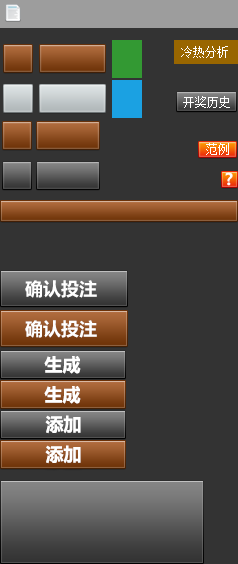
<style>
.page{position:relative;width:238px;height:564px;background:#333333}
.page>*{position:absolute;margin:0}
.t1{font:12px "NSimSun";color:#ffffff}
.t2{font:16px "MicrosoftYaHei-Bold";color:#ffffff}
.t3{font:18px "MicrosoftYaHei-Bold";color:#ffffff}
.t4{font:18px "MicrosoftYaHei-Bold"}
</style>
<div class="page">
<p class="t1" style="left:181px;top:46px;width:47px;height:12px">冷热分析</p>
<p class="t1" style="left:183px;top:96px;width:47px;height:12px">开奖历史</p>
<p class="t1" style="left:206px;top:143px;width:23px;height:12px">范例</p>
<p class="t2" style="left:225px;top:172px;width:8px;height:14px">?</p>
<p class="t3" style="left:25px;top:280px;width:72px;height:18px">确认投注</p>
<p class="t3" style="left:25px;top:320px;width:72px;height:18px">确认投注</p>
<p class="t4" style="left:42px;top:356px;width:37px;height:18px">生成</p>
<p class="t3" style="left:44px;top:356px;width:37px;height:18px">生成</p>
<p class="t3" style="left:44px;top:386px;width:37px;height:18px">生成</p>
<p class="t3" style="left:45px;top:415px;width:36px;height:19px">添加</p>
<p class="t3" style="left:45px;top:445px;width:36px;height:19px">添加</p>
</div>
